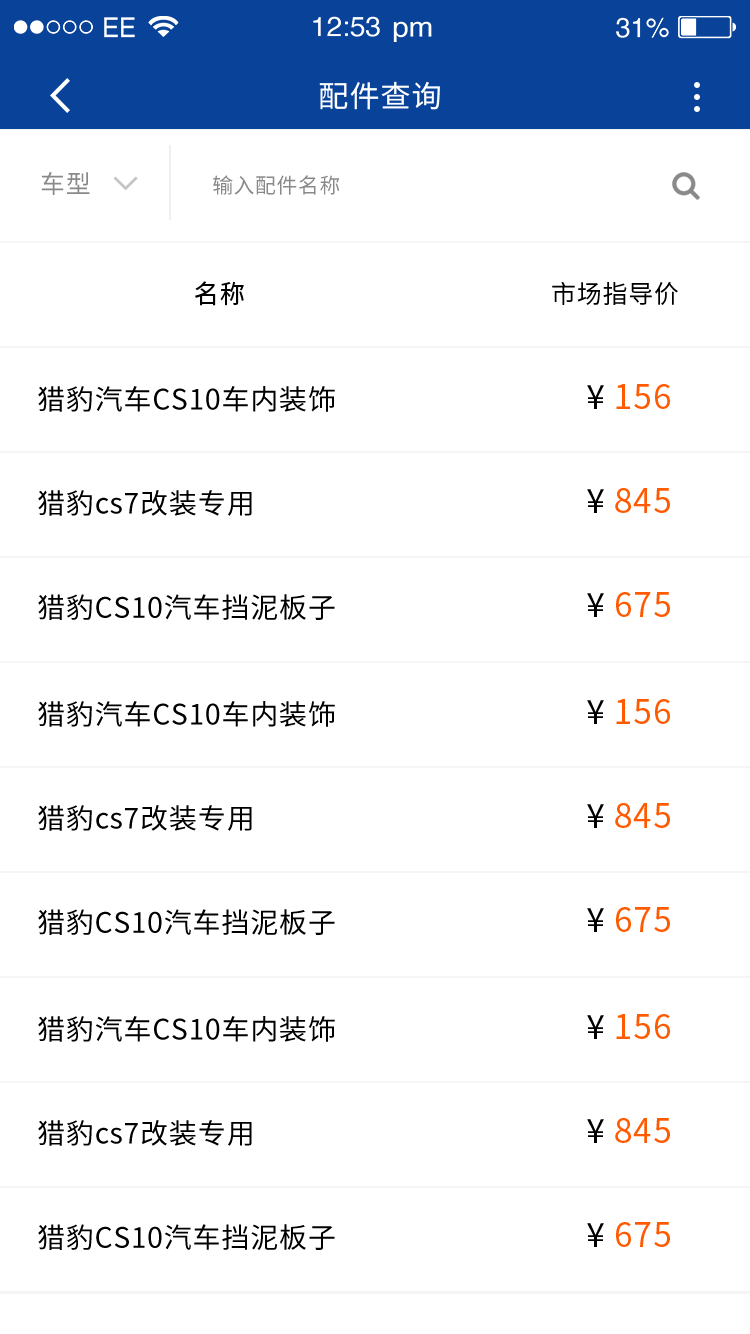
<style>
.page{position:relative;width:750px;height:1334px;background:#ffffff}
.page>*{position:absolute;margin:0}
.t1{font:30px "SourceHanSansCN-Regular";letter-spacing:0.03em;color:#ffffff;text-transform:uppercase}
.t2{font:20.8px "SourceHanSansCN-Regular";letter-spacing:0.03em;color:#898989;text-transform:uppercase}
.t3{font:25px "SourceHanSansCN-Regular";letter-spacing:0.03em;color:#898989;text-transform:uppercase}
.t4{font:25px "SourceHanSansCN-Regular";letter-spacing:0.03em;color:#000000}
.t5{font:28px/104.2px "SourceHanSansCN-Regular";letter-spacing:0.03em;color:#000000}
.t6{font:33.3px/104.2px "SourceHanSansCN-Regular";letter-spacing:0.03em;color:#ff5a00}
.t7{font:33.3px/104.2px "SourceHanSansCN-Regular";letter-spacing:0.03em;color:#000000}
</style>
<div class="page">
<p class="t1" style="left:319px;top:81px;width:121px;height:29px">配件查询</p>
<p class="t2" style="left:41px;top:172px;width:299px;height:23px"><span class="t3">车型                   </span>输入配件名称</p>
<p class="t4" style="left:195px;top:281px;width:49px;height:25px">名称</p>
<p class="t4" style="left:552px;top:282px;width:126px;height:23px">市场指导价</p>
<p class="t5" style="left:38px;top:386px;width:297px;height:234px">猎豹汽车CS10车内装饰<br>猎豹cs7改装专用<br>猎豹CS10汽车挡泥板子</p>
<p class="t6" style="left:587px;top:384px;width:83px;height:233px"><span class="t7">¥</span> 156<br><span class="t7">¥</span> 845<br><span class="t7">¥</span> 675</p>
<p class="t5" style="left:38px;top:701px;width:297px;height:234px">猎豹汽车CS10车内装饰<br>猎豹cs7改装专用<br>猎豹CS10汽车挡泥板子</p>
<p class="t6" style="left:587px;top:699px;width:83px;height:233px"><span class="t7">¥</span> 156<br><span class="t7">¥</span> 845<br><span class="t7">¥</span> 675</p>
<p class="t6" style="left:587px;top:1014px;width:83px;height:233px"><span class="t7">¥</span> 156<br><span class="t7">¥</span> 845<br><span class="t7">¥</span> 675</p>
<p class="t5" style="left:38px;top:1016px;width:297px;height:234px">猎豹汽车CS10车内装饰<br>猎豹cs7改装专用<br>猎豹CS10汽车挡泥板子</p>
</div>
